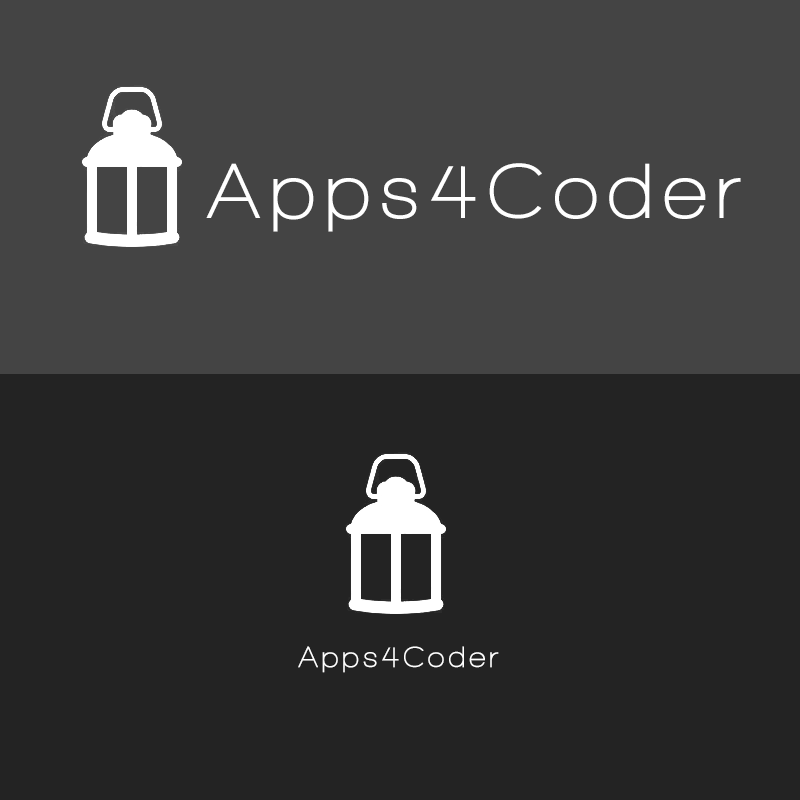
<style>
.page{position:relative;width:800px;height:800px;background:#232323}
.page>*{position:absolute;margin:0}
.t1{font:79.9px "WalkwayBold";letter-spacing:0.129em;color:#ffffff}
.t2{font:30px "WalkwayBold";letter-spacing:0.129em;color:#ffffff}
</style>
<div class="page">
<p class="t1" style="left:206px;top:163px;width:535px;height:69px">Apps4Coder</p>
<p class="t2" style="left:298px;top:646px;width:201px;height:27px">Apps4Coder</p>
</div>
